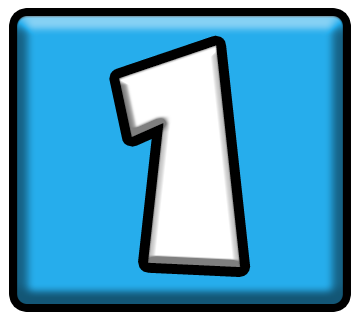
<style>
.page{position:relative;width:360px;height:320px;background:#26adec}
.page>*{position:absolute;margin:0}
.t1{font:303.3px "Funhouse";color:#ffffff;scale:0.91 1}
</style>
<div class="page">
<p class="t1" style="left:119px;top:45px;width:122px;height:222px">1</p>
</div>
